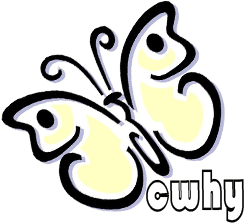
<style>
.page{position:relative;width:244px;height:223px;background:#ffffff}
.page>*{position:absolute;margin:0}
.t1{font:57.4px "STCaiyun";color:#010300;scale:0.72 1}
</style>
<div class="page">
<p class="t1" style="left:146px;top:169px;width:98px;height:54px">cwhy</p>
</div>
